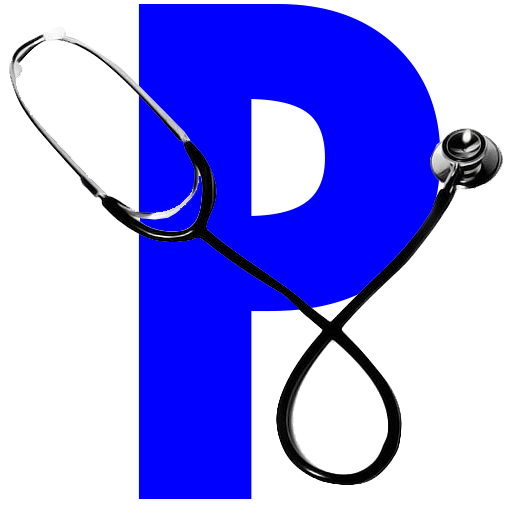
<style>
.page{position:relative;width:512px;height:512px;background:#ffffff}
.page>*{position:absolute;margin:0}
.t1{font:759.4px "TwCenMT-CondensedExtraBold";color:#0000ff}
</style>
<div class="page">
<p class="t1" style="left:138px;top:4px;width:303px;height:495px">P</p>
</div>
